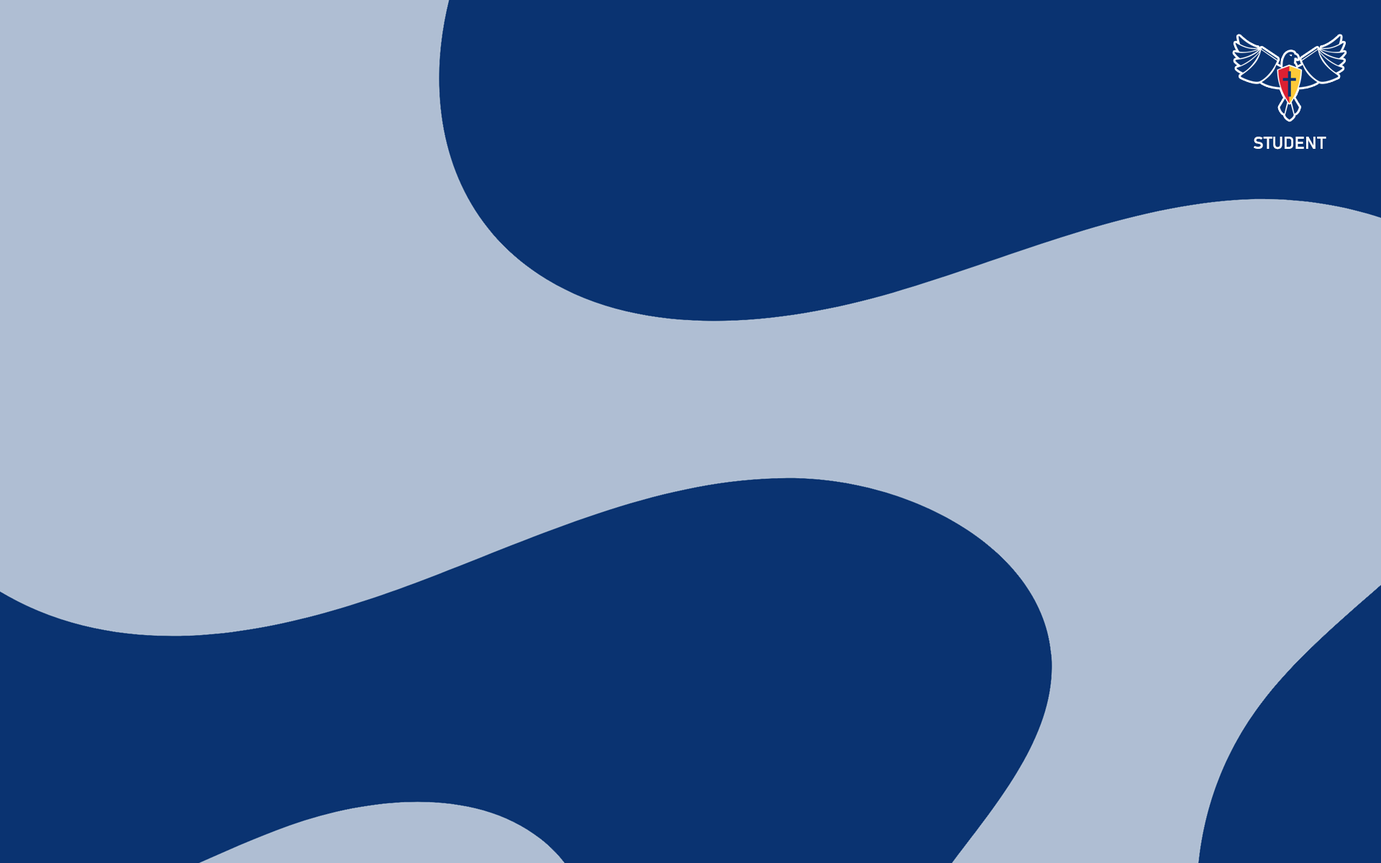
<style>
.page{position:relative;width:1381px;height:863px;background:#afbed3}
.page>*{position:absolute;margin:0}
.t1{font:17.3px "Bahnschrift-SemiBold";color:#ffffff}
</style>
<div class="page">
<p class="t1" style="left:1254px;top:137px;width:73px;height:13px">STUDENT</p>
</div>
